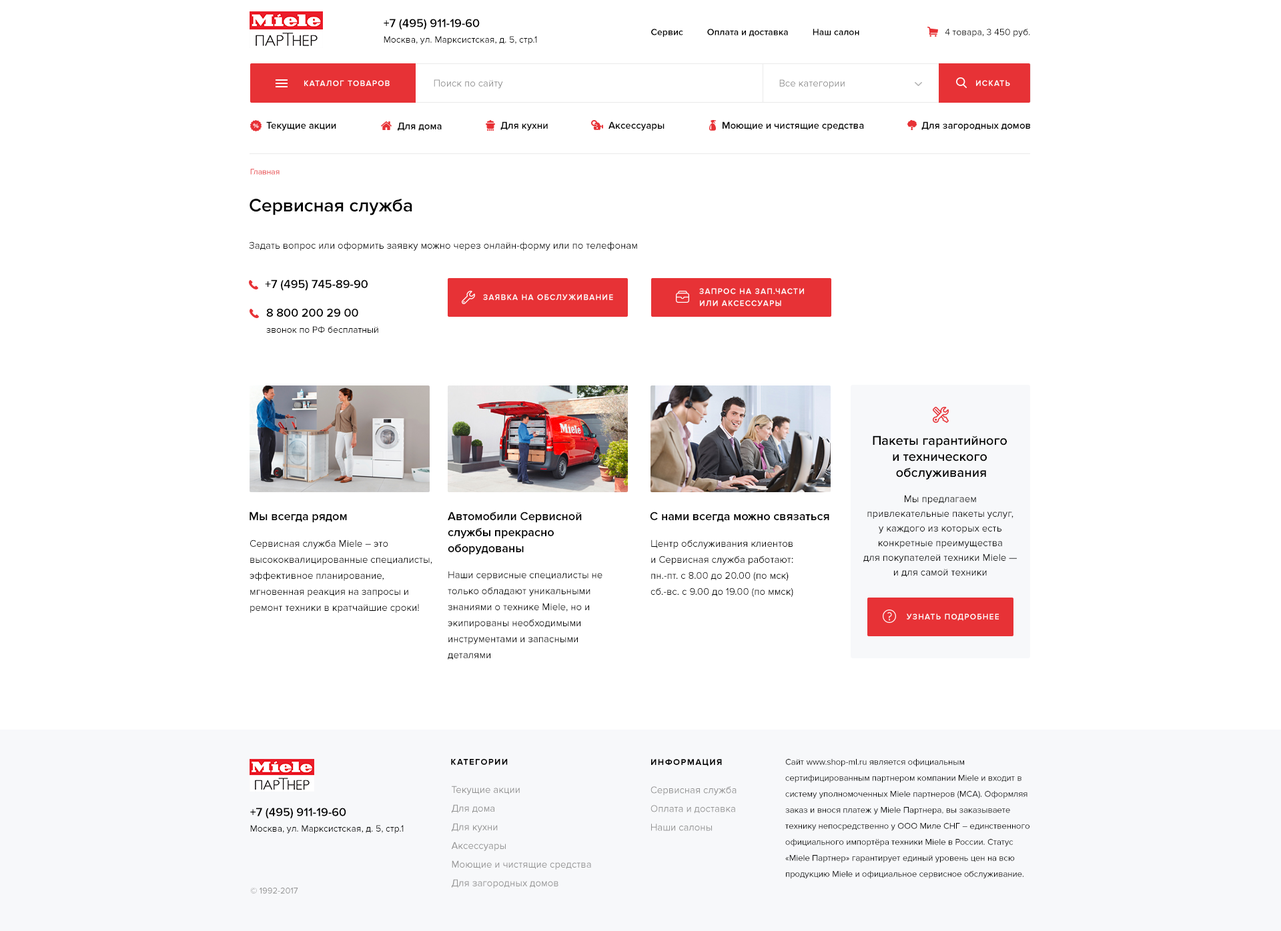
<style>
.page{position:relative;width:1281px;height:931px;background:#ffffff}
.page>*{position:absolute;margin:0}
.t1{font:12px "ProximaNova-Semibold";color:#000000}
.t2{font:9.3px "ProximaNova-Semibold";color:#000000}
.t3{font:9.3px "ProximaNova-Regular";color:#000000}
.t4{font:8px "ProximaNova-Semibold";letter-spacing:0.1em;color:#ffffff;text-transform:uppercase}
.t5{font:10px "ProximaNova-Regular";color:#909090}
.t6{font:10px "ProximaNova-Semibold";color:#000000}
.t7{font:8px "ProximaNova-Regular"}
.t8{font:18.7px "ProximaNova-Semibold";color:#000000}
.t9{font:10px "ProximaNova-Regular";color:#000000}
.t10{font:8px/12px "ProximaNova-Semibold";letter-spacing:0.1em;color:#ffffff;text-transform:uppercase}
.t11{font:9.3px/16px "ProximaNova-Regular";color:#000000}
.t12{font:12px/16px "ProximaNova-Semibold";color:#000000}
.t13{font:13.3px/16px "ProximaNova-Semibold";color:#000000}
.t14{font:10px/14.7px "ProximaNova-Regular";color:#000000}
.t15{font:10px/16px "ProximaNova-Regular";color:#000000}
.t16{font:8.7px "ProximaNova-Bold";letter-spacing:0.1em;color:#000000;text-transform:uppercase}
.t17{font:8.7px/16px "ProximaNova-Regular";color:#000000}
.t18{font:10px/18.7px "ProximaNova-Regular";color:#909090}
.t19{font:8.7px "ProximaNova-Regular";color:#909090}
</style>
<div class="page">
<p class="t1" style="left:384px;top:19px;width:96px;height:11px">+7 (495) 911-19-60</p>
<p class="t2" style="left:651px;top:29px;width:208px;height:8px">Сервис          Оплата и доставка          Наш салон</p>
<p class="t3" style="left:944px;top:29px;width:86px;height:8px">4 товара, 3 450 руб.</p>
<p class="t3" style="left:384px;top:36px;width:153px;height:9px">Москва, ул. Марксистская, д. 5, стр.1</p>
<p class="t4" style="left:304px;top:80px;width:86px;height:6px">Каталог товаров</p>
<p class="t5" style="left:434px;top:79px;width:69px;height:10px">Поиск по сайту</p>
<p class="t5" style="left:779px;top:79px;width:65px;height:10px">Все категории</p>
<p class="t4" style="left:976px;top:80px;width:34px;height:6px">искать</p>
<p class="t6" style="left:266px;top:121px;width:70px;height:10px">Текущие акции</p>
<p class="t6" style="left:398px;top:122px;width:44px;height:9px">Для дома</p>
<p class="t6" style="left:500px;top:121px;width:48px;height:10px">Для кухни</p>
<p class="t6" style="left:608px;top:121px;width:56px;height:10px">Аксессуары</p>
<p class="t6" style="left:722px;top:121px;width:142px;height:10px">Моющие и чистящие средства</p>
<p class="t6" style="left:921px;top:121px;width:109px;height:10px">Для загородных домов</p>
<p class="t7" style="left:250px;top:169px;width:29px;height:6px">Главная</p>
<p class="t8" style="left:249px;top:199px;width:163px;height:16px">Сервисная служба</p>
<p class="t9" style="left:249px;top:241px;width:388px;height:10px">Задать вопрос или оформить заявку можно через онлайн-форму или по телефонам</p>
<p class="t1" style="left:265px;top:279px;width:103px;height:12px">+7 (495) 745-89-90</p>
<p class="t10" style="left:699px;top:288px;width:105px;height:18px">запрос на зап.части<br>или аксессуары</p>
<p class="t4" style="left:483px;top:294px;width:130px;height:6px">заявка на обслуживание</p>
<p class="t11" style="left:266px;top:308px;width:112px;height:25px"><span class="t12">8 800 200 29 00<br></span>звонок по РФ бесплатный</p>
<p class="t13" style="left:872px;top:436px;width:134px;height:44px;text-align:center">Пакеты гарантийного <br>и технического <br>обслуживания</p>
<p class="t14" style="left:863px;top:495px;width:154px;height:82px;text-align:center">Мы предлагаем привлекательные пакеты услуг,<br>у каждого из которых есть конкретные преимущества<br>для покупателей техники Miele — и для самой техники</p>
<p class="t1" style="left:249px;top:512px;width:98px;height:11px">Мы всегда рядом</p>
<p class="t12" style="left:448px;top:512px;width:134px;height:43px">Автомобили Сервисной<br>службы прекрасно<br>оборудованы</p>
<p class="t1" style="left:650px;top:512px;width:179px;height:10px">С нами всегда можно связаться</p>
<p class="t15" style="left:249px;top:540px;width:183px;height:73px">Сервисная служба Miele – это высококвалицированные специалисты, эффективное планирование, мгновенная реакция на запросы и ремонт техники в кратчайшие сроки!</p>
<p class="t15" style="left:650px;top:540px;width:143px;height:57px">Центр обслуживания клиентов<br>и Сервисная служба работают:<br>пн.-пт. с 8.00 до 20.00 (по мск)<br>сб.-вс. с 9.00 до 19.00 (по ммск)</p>
<p class="t15" style="left:448px;top:571px;width:154px;height:89px">Наши сервисные специалисты не только обладают уникальными знаниями о технике Miele, но и экипированы необходимыми инструментами и запасными деталями</p>
<p class="t4" style="left:906px;top:614px;width:92px;height:7px">Узнать подробнее</p>
<p class="t16" style="left:451px;top:759px;width:57px;height:6px">Категории</p>
<p class="t16" style="left:651px;top:759px;width:71px;height:7px">Информация</p>
<p class="t17" style="left:785px;top:759px;width:244px;height:120px">Сайт www.shop-ml.ru является официальным сертифицированным партнером компании Miele и входит в систему уполномоченных Miele партнеров (MCA). Оформляя заказ и внося платеж у Miele Партнера, вы заказываете технику непосредственно у ООО Миле СНГ – единственного официального импортёра техники Miele в России. Статус «Miele Партнер» гарантирует единый уровень цен на всю продукцию Miele и официальное сервисное обслуживание.</p>
<p class="t18" style="left:451px;top:786px;width:140px;height:102px">Текущие акции<br>Для дома<br>Для кухни<br>Аксессуары<br>Моющие и чистящие средства<br>Для загородных домов</p>
<p class="t18" style="left:650px;top:786px;width:86px;height:45px">Сервисная служба<br>Оплата и доставка<br>Наши салоны</p>
<p class="t1" style="left:250px;top:808px;width:96px;height:11px">+7 (495) 911-19-60</p>
<p class="t3" style="left:250px;top:825px;width:154px;height:9px">Москва, ул. Марксистская, д. 5, стр.1</p>
<p class="t19" style="left:250px;top:888px;width:48px;height:6px">© 1992-2017</p>
</div>
